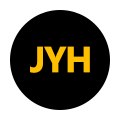
<style>
.page{position:relative;width:120px;height:120px;background:#000000}
.page>*{position:absolute;margin:0}
.t1{font:36px "MicrosoftPhagsPa-Bold";letter-spacing:-0.025em;color:#febf00}
</style>
<div class="page">
<p class="t1" style="left:30px;top:46px;width:60px;height:27px">JYH</p>
</div>
